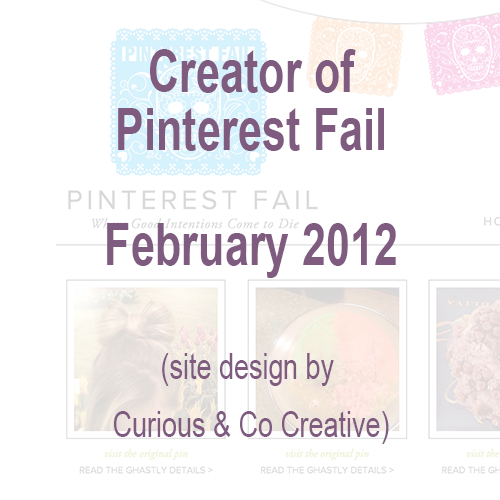
<style>
.page{position:relative;width:500px;height:500px;background:#ffffff}
.page>*{position:absolute;margin:0}
.t1{font:58px/57.4px "Arial-BoldMT";color:#7f5b80;scale:0.75 1}
.t2{font:36px/57.4px "ArialMT";color:#7f5b80;scale:0.75 1}
</style>
<div class="page">
<p class="t1" style="left:107px;top:49px;width:289px;height:395px;text-align:center">Creator of<br>Pinterest Fail<br><br>February 2012<br><br><span class="t2">(site design by <br>Curious &amp; Co Creative)</span></p>
</div>
